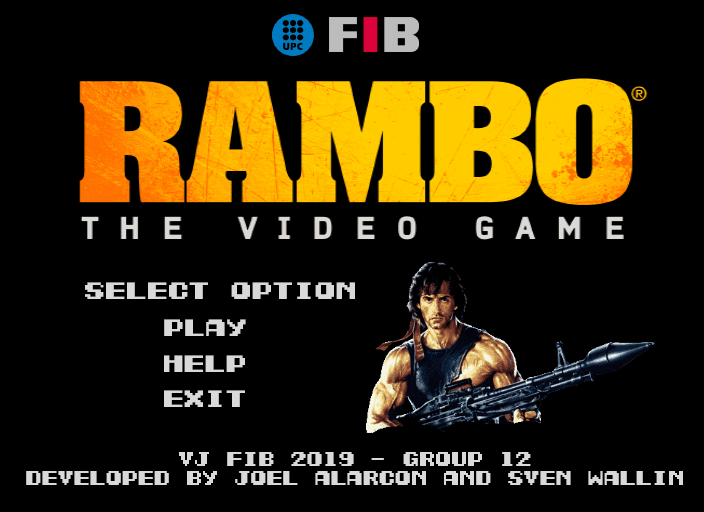
<style>
.page{position:relative;width:704px;height:512px;background:#000000}
.page>*{position:absolute;margin:0}
.t1{font:18.8px "Contra-(Famicom/NES)";color:#d9d9d9;scale:1.12 1}
.t2{font:16px "Contra-(Famicom/NES)";color:#d9d9d9}
</style>
<div class="page">
<p class="t1" style="left:85px;top:282px;width:270px;height:17px">select option</p>
<p class="t1" style="left:164px;top:319px;width:82px;height:17px">play</p>
<p class="t1" style="left:164px;top:355px;width:81px;height:17px">help</p>
<p class="t1" style="left:164px;top:390px;width:81px;height:17px">exit</p>
<p class="t2" style="left:26px;top:452px;width:657px;height:33px;text-align:center">vj fib 2019 - group 12<br>developed by joel alarcon and sven wallin</p>
</div>
